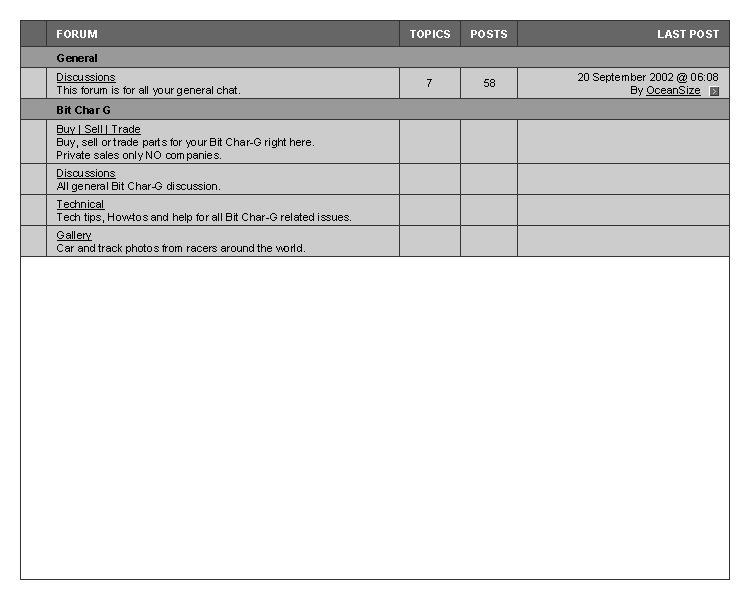
<style>
.page{position:relative;width:750px;height:600px;background:#ffffff}
.page>*{position:absolute;margin:0}
.t1{font:11px "Arial-BoldMT";color:#ffffff}
.t2{font:11px "Arial-BoldMT";color:#000000}
.t3{font:11px "ArialMT";color:#000000}
.t4{font:11px "ArialMT";color:#000000;text-decoration:underline}
</style>
<div class="page">
<p class="t1" style="left:57px;top:30px;width:40px;height:8px">FORUM</p>
<p class="t1" style="left:410px;top:30px;width:40px;height:8px">TOPICS</p>
<p class="t1" style="left:471px;top:30px;width:36px;height:8px">POSTS</p>
<p class="t1" style="left:658px;top:30px;width:61px;height:8px">LAST POST</p>
<p class="t2" style="left:57px;top:54px;width:40px;height:8px">General</p>
<p class="t3" style="left:57px;top:73px;width:183px;height:23px"><span class="t4">Discussions<br></span>This forum is for all your general chat.</p>
<p class="t3" style="left:578px;top:73px;width:140px;height:23px;text-align:right">20 September 2002 @ 06:08<br>By <span class="t4">OceanSize</span></p>
<p class="t3" style="left:427px;top:79px;width:5px;height:8px">7</p>
<p class="t3" style="left:484px;top:79px;width:11px;height:8px">58</p>
<p class="t2" style="left:57px;top:106px;width:53px;height:8px">Bit Char G</p>
<p class="t3" style="left:57px;top:125px;width:257px;height:36px"><span class="t4">Buy | Sell | Trade<br></span>Buy, sell or trade parts for your Bit Char-G right here.<br>Private sales only NO companies.</p>
<p class="t3" style="left:57px;top:169px;width:163px;height:23px"><span class="t4">Discussions<br></span>All general Bit Char-G discussion.</p>
<p class="t3" style="left:57px;top:200px;width:294px;height:23px"><span class="t4">Technical<br></span>Tech tips, How-tos and help for all Bit Char-G related issues.</p>
<p class="t3" style="left:57px;top:231px;width:248px;height:23px"><span class="t4">Gallery<br></span>Car and track photos from racers around the world.</p>
</div>
